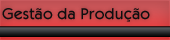
<style>
.page{position:relative;width:170px;height:40px}
.page>*{position:absolute;margin:0}
.t1{font:16px "KabobRegular";color:#0e0e0f}
</style>
<div class="page">
<p class="t1" style="left:2px;top:8px;width:148px;height:14px">Gestão da Produção</p>
</div>
